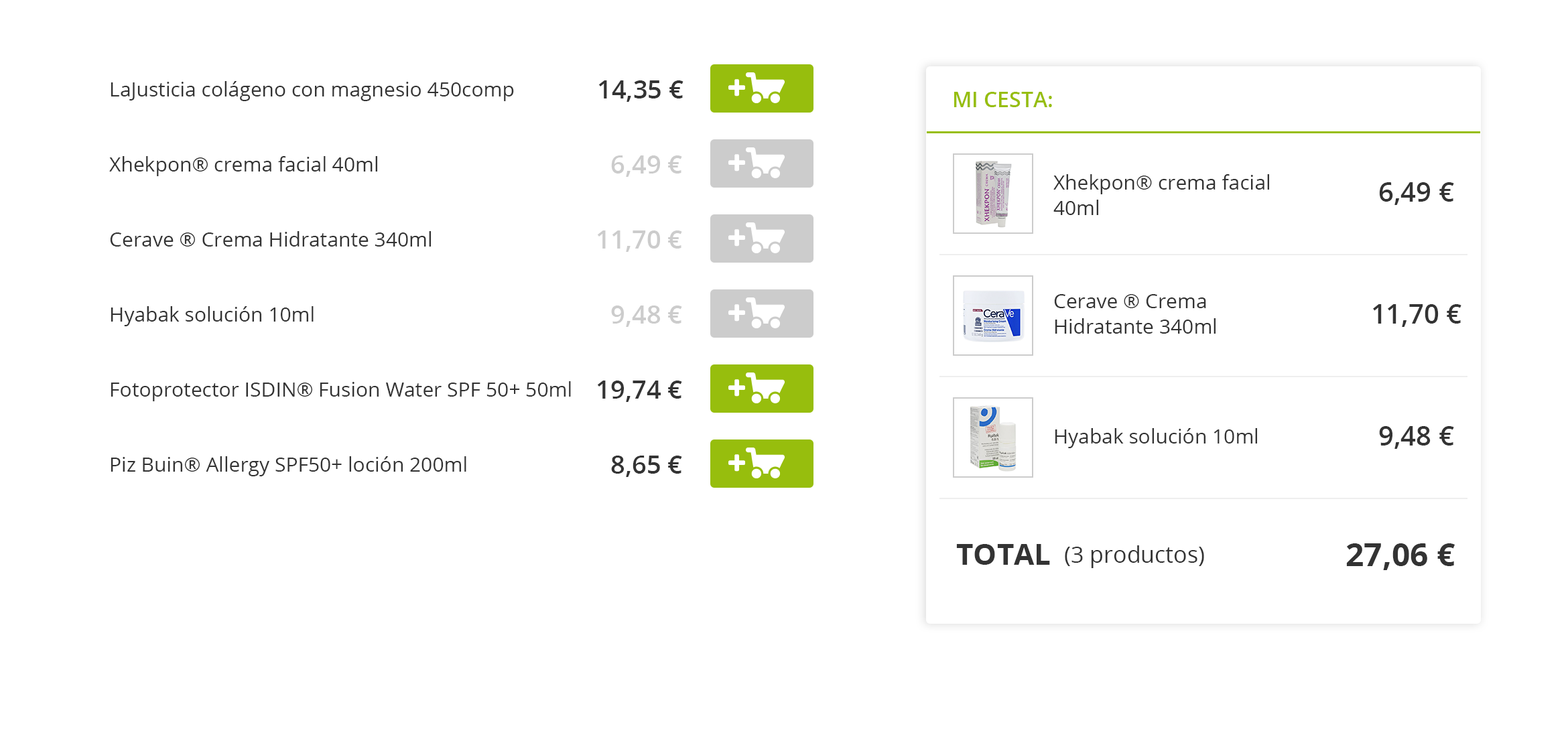
<style>
.page{position:relative;width:1568px;height:747px;background:#ffffff}
.page>*{position:absolute;margin:0}
.t1{font:20.1px "OpenSans";color:#333333}
.t2{font:25.5px "OpenSans-Semibold";color:#333333}
.t3{font:21.4px "OpenSans-Semibold";color:#97be0d}
.t4{font:25.5px "OpenSans-Semibold";color:#cccccc}
.t5{font:20.1px/25.5px "OpenSans";color:#333333}
.t6{font:26.8px "OpenSans-Semibold";color:#333333}
.t7{font:29.5px "OpenSans-Bold";color:#333333}
.t8{font:22.8px "OpenSans";color:#333333}
.t9{font:32.2px "OpenSans-Bold";color:#333333}
</style>
<div class="page">
<p class="t1" style="left:111px;top:81px;width:403px;height:20px">LaJusticia colágeno con magnesio 450comp</p>
<p class="t2" style="left:598px;top:80px;width:85px;height:22px">14,35 €</p>
<p class="t3" style="left:954px;top:92px;width:98px;height:15px">MI CESTA:</p>
<p class="t1" style="left:109px;top:156px;width:268px;height:20px">Xhekpon® crema facial 40ml</p>
<p class="t4" style="left:611px;top:155px;width:71px;height:22px">6,49 €</p>
<p class="t5" style="left:1053px;top:174px;width:216px;height:41px">Xhekpon® crema facial 40ml</p>
<p class="t6" style="left:1379px;top:182px;width:75px;height:23px">6,49 €</p>
<p class="t1" style="left:110px;top:231px;width:321px;height:16px">Cerave ® Crema Hidratante 340ml</p>
<p class="t4" style="left:597px;top:231px;width:85px;height:21px">11,70 €</p>
<p class="t4" style="left:611px;top:306px;width:71px;height:21px">9,48 €</p>
<p class="t5" style="left:1054px;top:294px;width:162px;height:40px">Cerave ® Crema Hidratante 340ml</p>
<p class="t6" style="left:1373px;top:304px;width:88px;height:23px">11,70 €</p>
<p class="t1" style="left:111px;top:306px;width:203px;height:20px">Hyabak solución 10ml</p>
<p class="t1" style="left:111px;top:381px;width:460px;height:20px">Fotoprotector ISDIN® Fusion Water SPF 50+ 50ml</p>
<p class="t2" style="left:597px;top:381px;width:85px;height:21px">19,74 €</p>
<p class="t1" style="left:1055px;top:428px;width:202px;height:20px">Hyabak solución 10ml</p>
<p class="t6" style="left:1379px;top:426px;width:75px;height:23px">9,48 €</p>
<p class="t1" style="left:111px;top:456px;width:355px;height:20px">Piz Buin® Allergy SPF50+ loción 200ml</p>
<p class="t2" style="left:611px;top:456px;width:71px;height:21px">8,65 €</p>
<p class="t7" style="left:956px;top:544px;width:94px;height:21px">TOTAL</p>
<p class="t8" style="left:1065px;top:545px;width:139px;height:23px">(3 productos)</p>
<p class="t9" style="left:1346px;top:543px;width:109px;height:27px">27,06 €</p>
</div>
